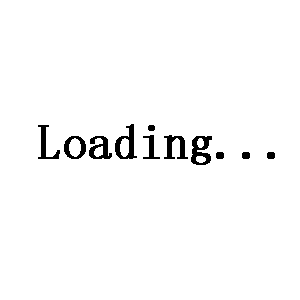
<style>
.page{position:relative;width:300px;height:300px;background:#ffffff}
.page>*{position:absolute;margin:0}
.t1{font:48px "SimSun";color:#000000;font-weight:bold}
</style>
<div class="page">
<p class="t1" style="left:38px;top:124px;width:237px;height:41px">Loading...</p>
</div>
